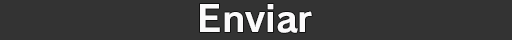
<style>
.page{position:relative;width:512px;height:40px;background:#333333}
.page>*{position:absolute;margin:0}
.t1{font:36px "RodinPro-B";letter-spacing:-0.003em;color:#fbfafb}
</style>
<div class="page">
<p class="t1" style="left:200px;top:4px;width:112px;height:29px">Enviar</p>
</div>
